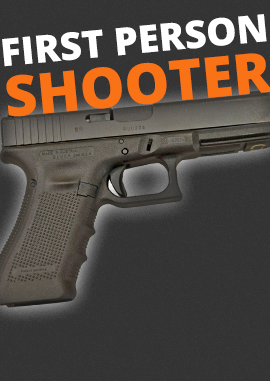
<style>
.page{position:relative;width:270px;height:381px;background:#333333}
.page>*{position:absolute;margin:0}
.t1{font:38.1px "OpenSans-Extrabold";color:#ffffff}
</style>
<div class="page">
<p class="t1" style="left:2px;top:14px;width:265px;height:53px;rotate:-5deg">FIRST PERSON</p>
</div>
